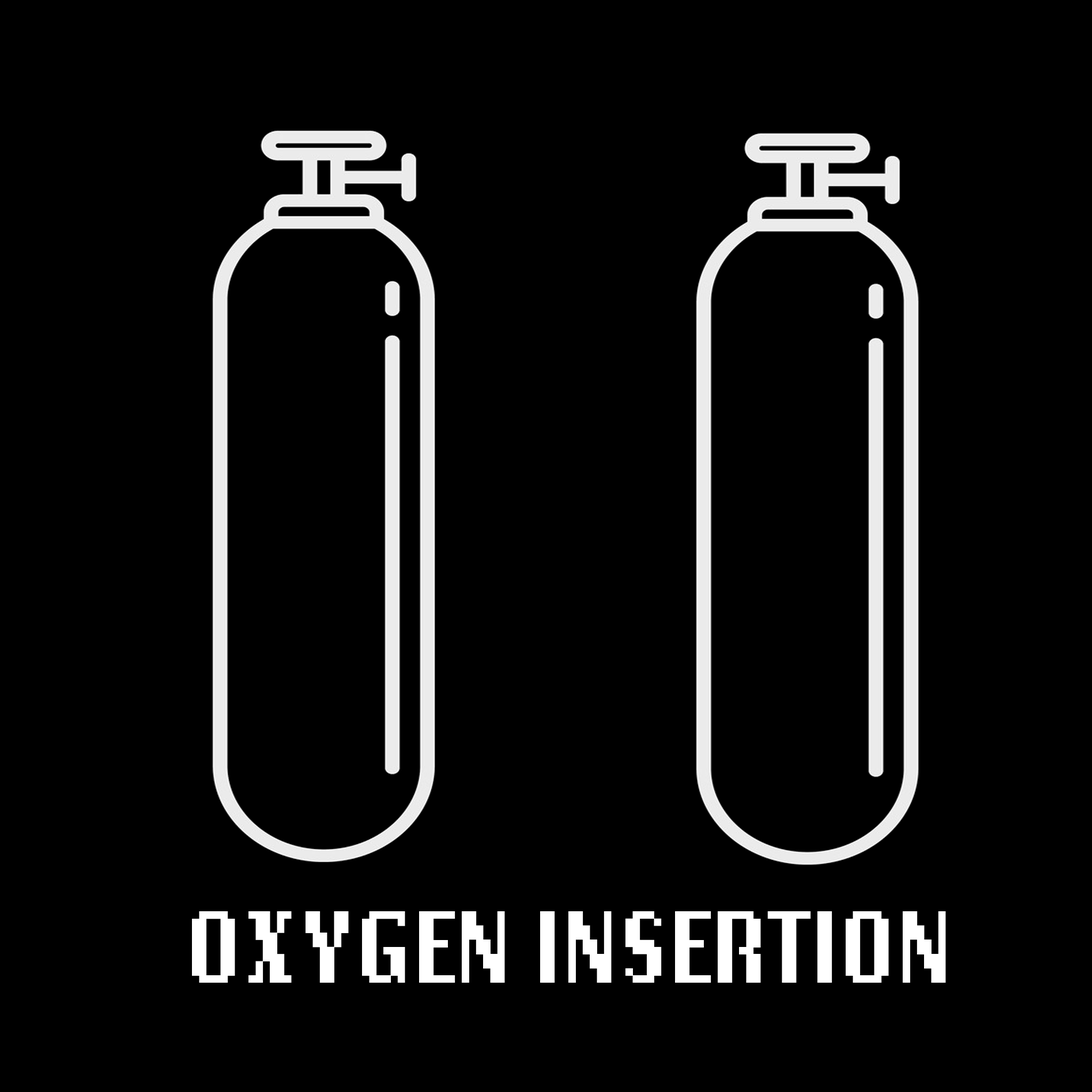
<style>
.page{position:relative;width:1092px;height:1092px;background:#000000}
.page>*{position:absolute;margin:0}
.t1{font:106.6px "LoRes15OT-BoldAltOakland";color:#ffffff}
</style>
<div class="page">
<p class="t1" style="left:192px;top:911px;width:754px;height:72px">OXYGEN INSERTION</p>
</div>
